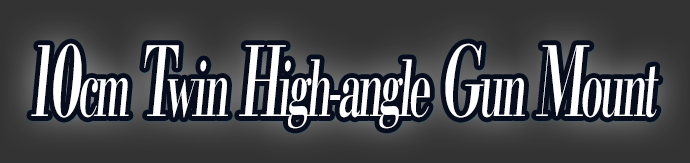
<style>
.page{position:relative;width:690px;height:163px}
.page>*{position:absolute;margin:0}
.t1{font:76.8px "KochoStd-Heavy";letter-spacing:-0.08em;color:#ffffff;font-style:italic;scale:0.53 1}
.t2{font:96px "KochoStd-Heavy";letter-spacing:-0.08em;color:#ffffff;font-style:italic;scale:0.53 1}
</style>
<div class="page">
<p class="t1" style="left:31px;top:43px;width:628px;height:86px"><span class="t2">10</span>cm<span class="t2"> T</span>win<span class="t2"> H</span>igh-angle<span class="t2"> G</span>un<span class="t2"> M</span>ount</p>
</div>
